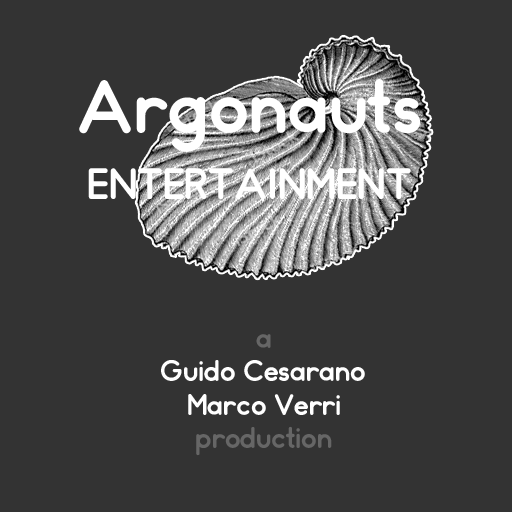
<style>
.page{position:relative;width:512px;height:512px;background:#333333}
.page>*{position:absolute;margin:0}
.t1{font:70.9px "Somatic-Rounded";color:#ffffff}
.t2{font:40.5px "Somatic-Rounded";color:#ffffff}
.t3{font:27.8px "Somatic-Rounded";color:#ffffff}
.t4{font:27.8px/8.3px "Somatic-Rounded";color:#666666}
.t5{font:27.8px "Somatic-Rounded";color:#666666}
</style>
<div class="page">
<p class="t1" style="left:79px;top:79px;width:342px;height:73px">Argonauts</p>
<p class="t2" style="left:88px;top:168px;width:323px;height:32px">ENTERTAINMENT</p>
<p class="t3" style="left:161px;top:334px;width:204px;height:122px;text-align:center"><span class="t4">a<br></span>Guido Cesarano<br>Marco Verri<br><span class="t5">production</span></p>
</div>
